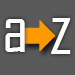
<style>
.page{position:relative;width:75px;height:75px;background:#595959}
.page>*{position:absolute;margin:0}
.t1{font:70.5px "AgencyFB-Reg";color:#ffffff}
.t2{font:75px "AgencyFB-Reg";color:#ffffff}
</style>
<div class="page">
<p class="t1" style="left:5px;top:19px;width:20px;height:33px">a</p>
<p class="t2" style="left:51px;top:18px;width:20px;height:36px">z</p>
</div>
